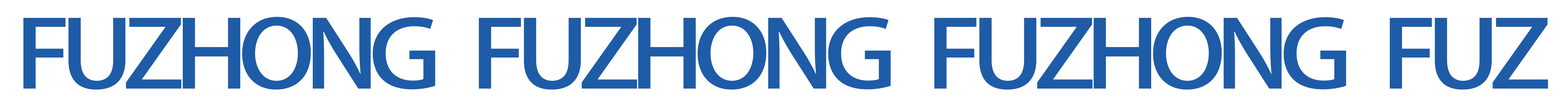
<style>
.page{position:relative;width:1568px;height:110px;background:#ffffff}
.page>*{position:absolute;margin:0}
.t1{font:92.3px "AdobeHeitiStd-Regular";letter-spacing:-0.1em;color:#1e5ca8;scale:1.15 1}
</style>
<div class="page">
<p class="t1" style="left:23px;top:17px;width:1525px;height:73px">FUZHONG   FUZHONG   FUZHONG   FUZ</p>
</div>
